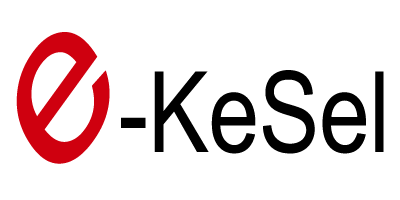
<style>
.page{position:relative;width:400px;height:200px;background:#ffffff}
.page>*{position:absolute;margin:0}
.t1{font:198.6px "ArialMT";color:#cf000f;scale:1.17 1}
.t2{font:112.4px "ArialMT";color:#000000;scale:0.8 1}
</style>
<div class="page">
<p class="t1" style="left:16px;top:32px;width:94px;height:132px;rotate:-54deg">e</p>
<p class="t2" style="left:121px;top:70px;width:263px;height:84px">-KeSel</p>
</div>
